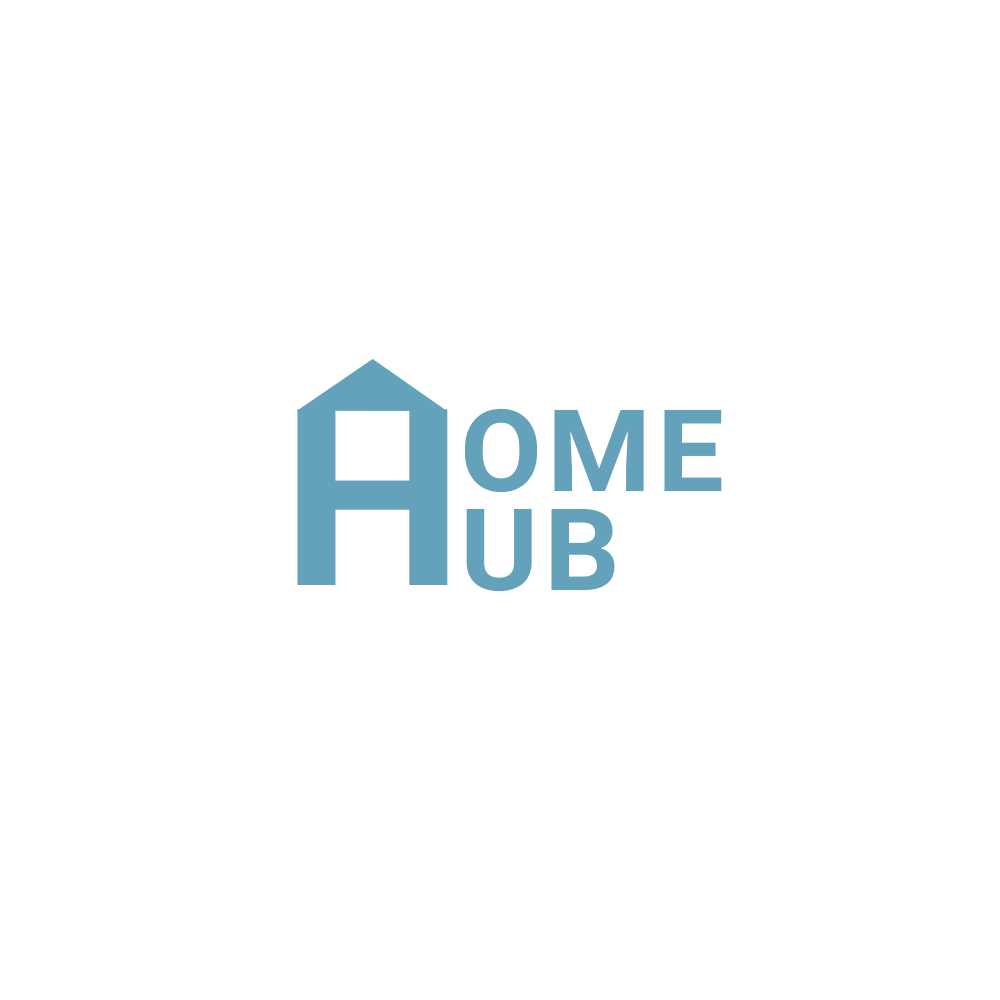
<style>
.page{position:relative;width:1000px;height:1000px;background:#ffffff}
.page>*{position:absolute;margin:0}
.t1{font:246.9px "Roboto-Bold";letter-spacing:0.04em;color:#64a1bb;scale:1.05 1}
.t2{font:113.5px/98.8px "Roboto-Bold";letter-spacing:0.04em;color:#64a1bb;scale:1.05 1}
</style>
<div class="page">
<p class="t1" style="left:297px;top:409px;width:151px;height:176px">H</p>
<p class="t2" style="left:465px;top:408px;width:257px;height:184px">OME<br>UB</p>
</div>
